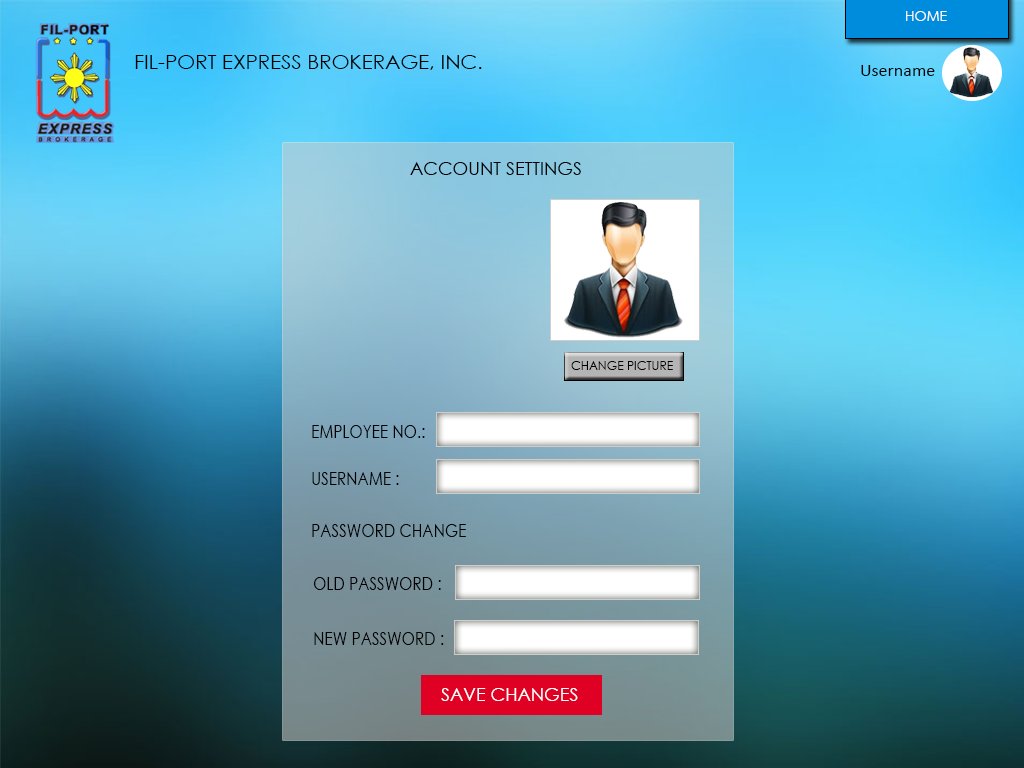
<style>
.page{position:relative;width:1024px;height:768px}
.page>*{position:absolute;margin:0}
.t1{font:20.3px "CenturyGothic";color:#000000;text-transform:uppercase}
.t2{font:18px/30.5px "Calibri";color:#000000}
.t3{font:18px "CenturyGothic";color:#000000;text-transform:uppercase}
.t4{font:12px "CenturyGothic";color:#000000;text-transform:uppercase}
.t5{font:18px "CenturyGothic";color:#000000;text-transform:uppercase;scale:0.85 1}
.t6{font:18px "CenturyGothic";color:#ffffff;text-transform:uppercase}
</style>
<div class="page">
<p class="t1" style="left:135px;top:55px;width:347px;height:15px">FIL-PORT EXPRESS BROKERAGE, INC.</p>
<p class="t2" style="left:861px;top:65px;width:74px;height:11px">Username<br>vvvvv</p>
<p class="t3" style="left:410px;top:162px;width:171px;height:13px">account settings</p>
<p class="t4" style="left:571px;top:361px;width:102px;height:9px">change picture</p>
<p class="t5" style="left:312px;top:425px;width:113px;height:13px">Employee no.:</p>
<p class="t5" style="left:312px;top:472px;width:87px;height:13px">Username :</p>
<p class="t5" style="left:312px;top:524px;width:154px;height:13px">Password Change</p>
<p class="t5" style="left:314px;top:577px;width:127px;height:13px">old password :</p>
<p class="t5" style="left:314px;top:632px;width:130px;height:13px">new password :</p>
<p class="t6" style="left:441px;top:688px;width:137px;height:13px">save changes</p>
</div>
